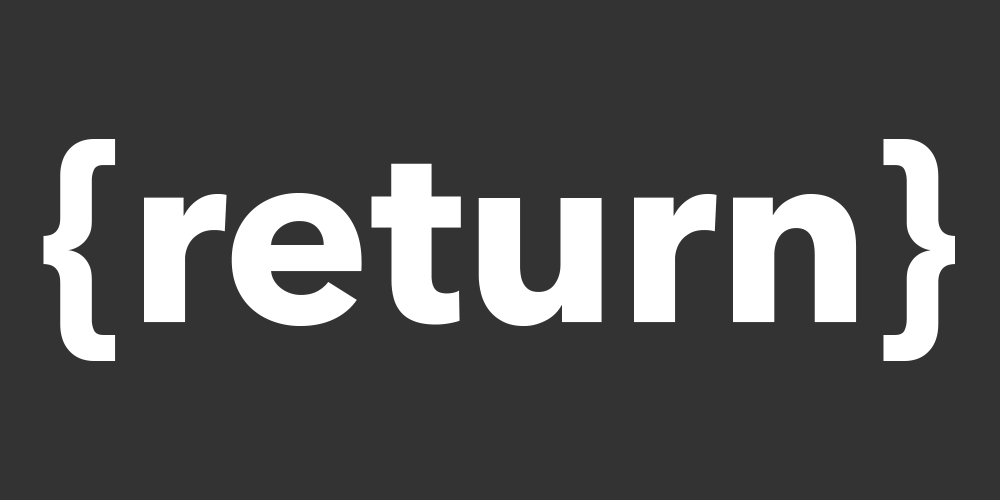
<style>
.page{position:relative;width:1000px;height:500px;background:#333333}
.page>*{position:absolute;margin:0}
.t1{font:250px "AvenirNext-Bold";color:#ffffff}
</style>
<div class="page">
<p class="t1" style="left:43px;top:139px;width:912px;height:222px">{return}</p>
</div>
